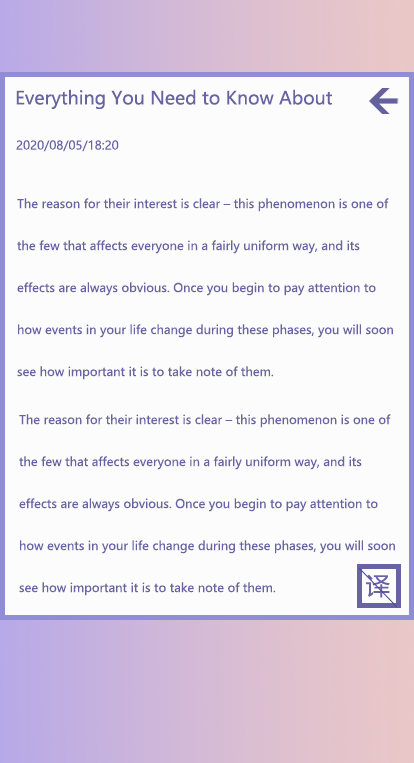
<style>
.page{position:relative;width:414px;height:763px;background:#fcfcfc}
.page>*{position:absolute;margin:0}
.t1{font:18px "MicrosoftYaHei";color:#6864a4}
.t2{font:18px "MicrosoftYaHei";color:#c5c4de}
.t3{font:12px "MicrosoftYaHei";color:#6864a4}
.t4{font:12px/42px "MicrosoftYaHei";color:#6864a4}
.t5{font:24px "MicrosoftYaHei";color:#6864a4}
</style>
<div class="page">
<p class="t1" style="left:16px;top:89px;width:316px;height:20px">Everything You Need to Know About <span class="t2">Mercury Retrograde</span></p>
<p class="t3" style="left:16px;top:140px;width:103px;height:12px">2020/08/05/18:20</p>
<p class="t4" style="left:17px;top:198px;width:376px;height:182px">The reason for their interest is clear – this phenomenon is one of the few that affects everyone in a fairly uniform way, and its effects are always obvious. Once you begin to pay attention to how events in your life change during these phases, you will soon see how important it is to take note of them.</p>
<p class="t4" style="left:19px;top:414px;width:376px;height:182px">The reason for their interest is clear – this phenomenon is one of the few that affects everyone in a fairly uniform way, and its effects are always obvious. Once you begin to pay attention to how events in your life change during these phases, you will soon see how important it is to take note of them.</p>
<p class="t5" style="left:366px;top:574px;width:24px;height:24px">译</p>
</div>
